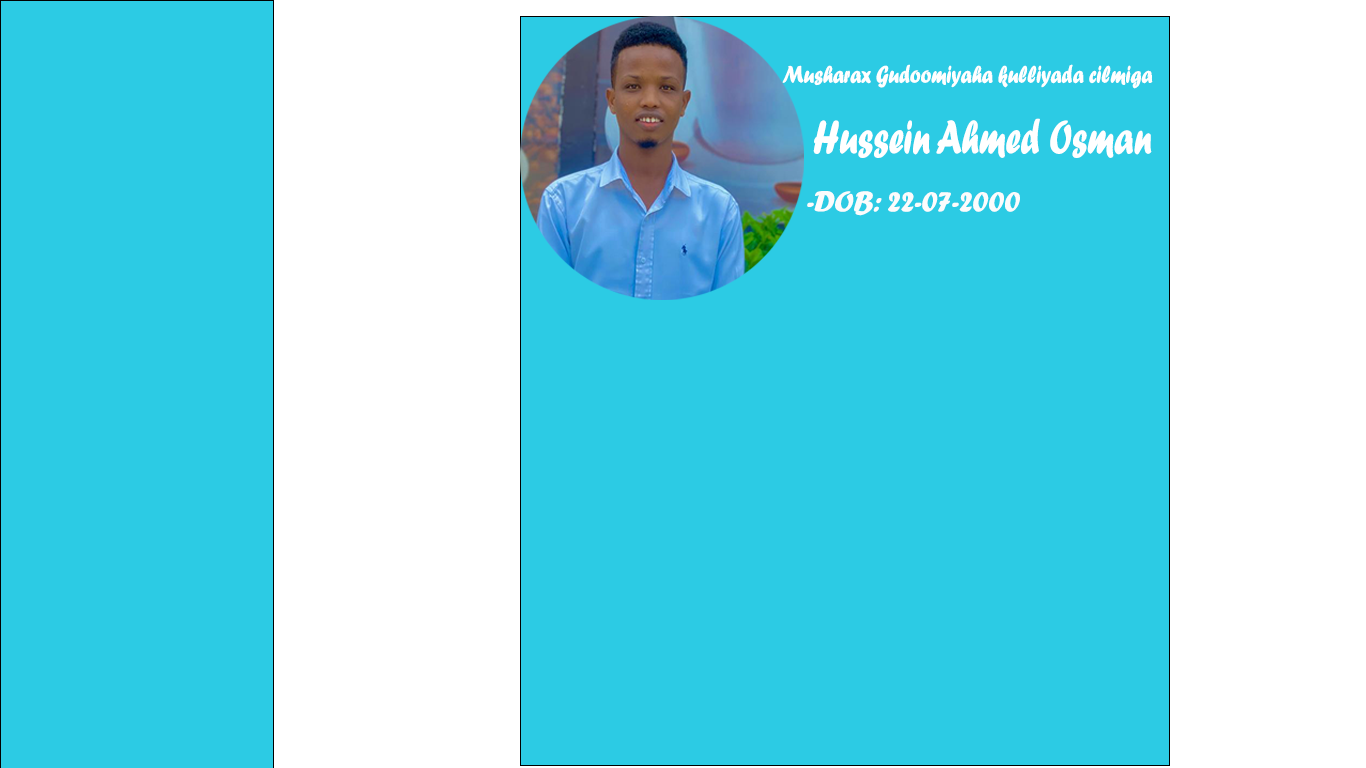
<style>
.page{position:relative;width:1366px;height:768px;background:#2ccbe4}
.page>*{position:absolute;margin:0}
.t1{font:25.2px "ForteMT";color:#ffffff;scale:0.78 1}
.t2{font:49px "ForteMT";color:#ffffff;scale:0.71 1}
.t3{font:30px "ForteMT";color:#fcfcfc}
</style>
<div class="page">
<p class="t1" style="left:782px;top:64px;width:371px;height:25px">Musharax Gudoomiyaha kulliyada cilmiga</p>
<p class="t2" style="left:813px;top:118px;width:339px;height:40px">Hussein Ahmed Osman</p>
<p class="t3" style="left:807px;top:191px;width:213px;height:25px">-DOB: 22-07-2000</p>
</div>
